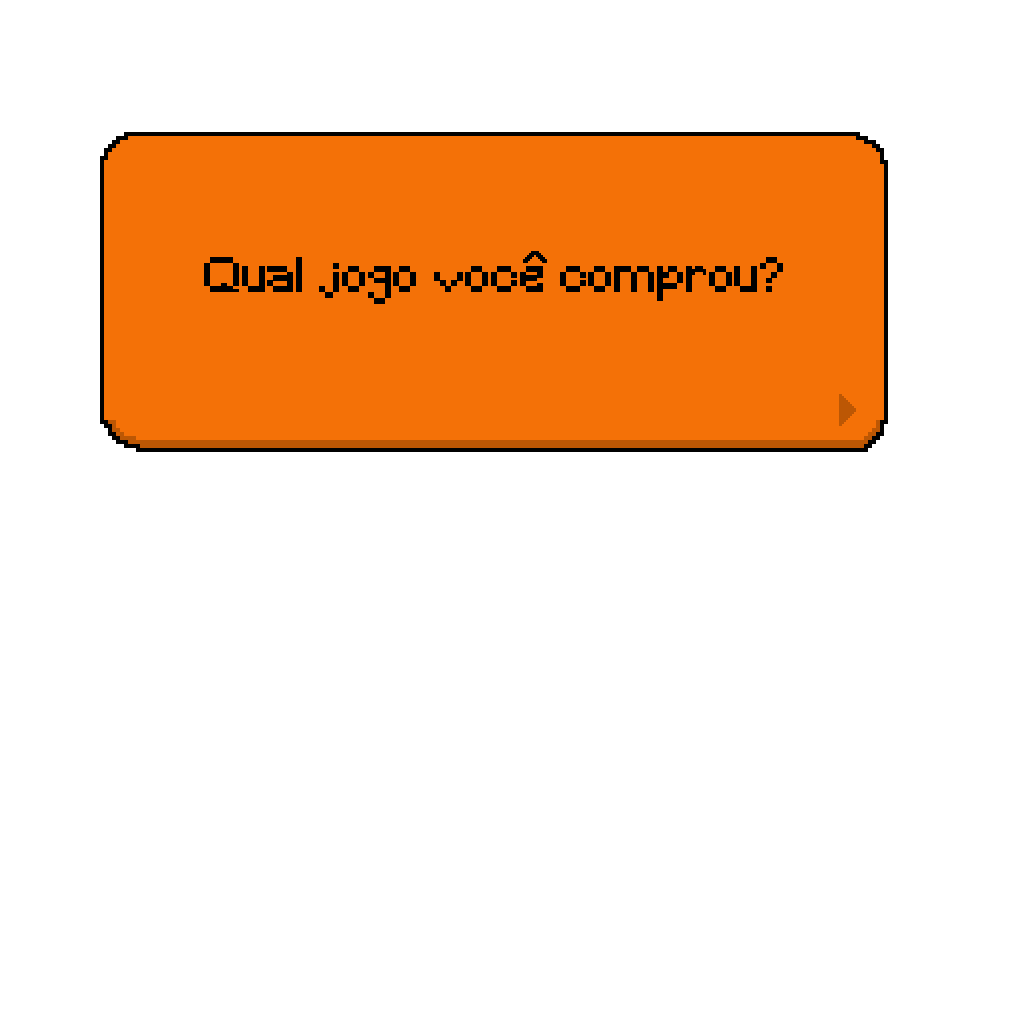
<style>
.page{position:relative;width:1024px;height:1024px;background:#ffffff}
.page>*{position:absolute;margin:0}
.t1{font:45.8px "Minecraft";color:#000000}
</style>
<div class="page">
<p class="t1" style="left:204px;top:257px;width:579px;height:47px">Qual jogo voce comprou?</p>
</div>
